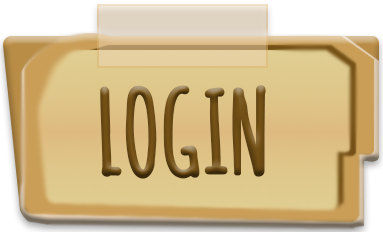
<style>
.page{position:relative;width:383px;height:232px}
.page>*{position:absolute;margin:0}
.t1{font:112.3px "AmaticSC-Bold";letter-spacing:-0.02em;color:#735015;font-weight:bold;scale:0.97 1}
</style>
<div class="page">
<p class="t1" style="left:100px;top:85px;width:166px;height:94px">LOGIN</p>
</div>
